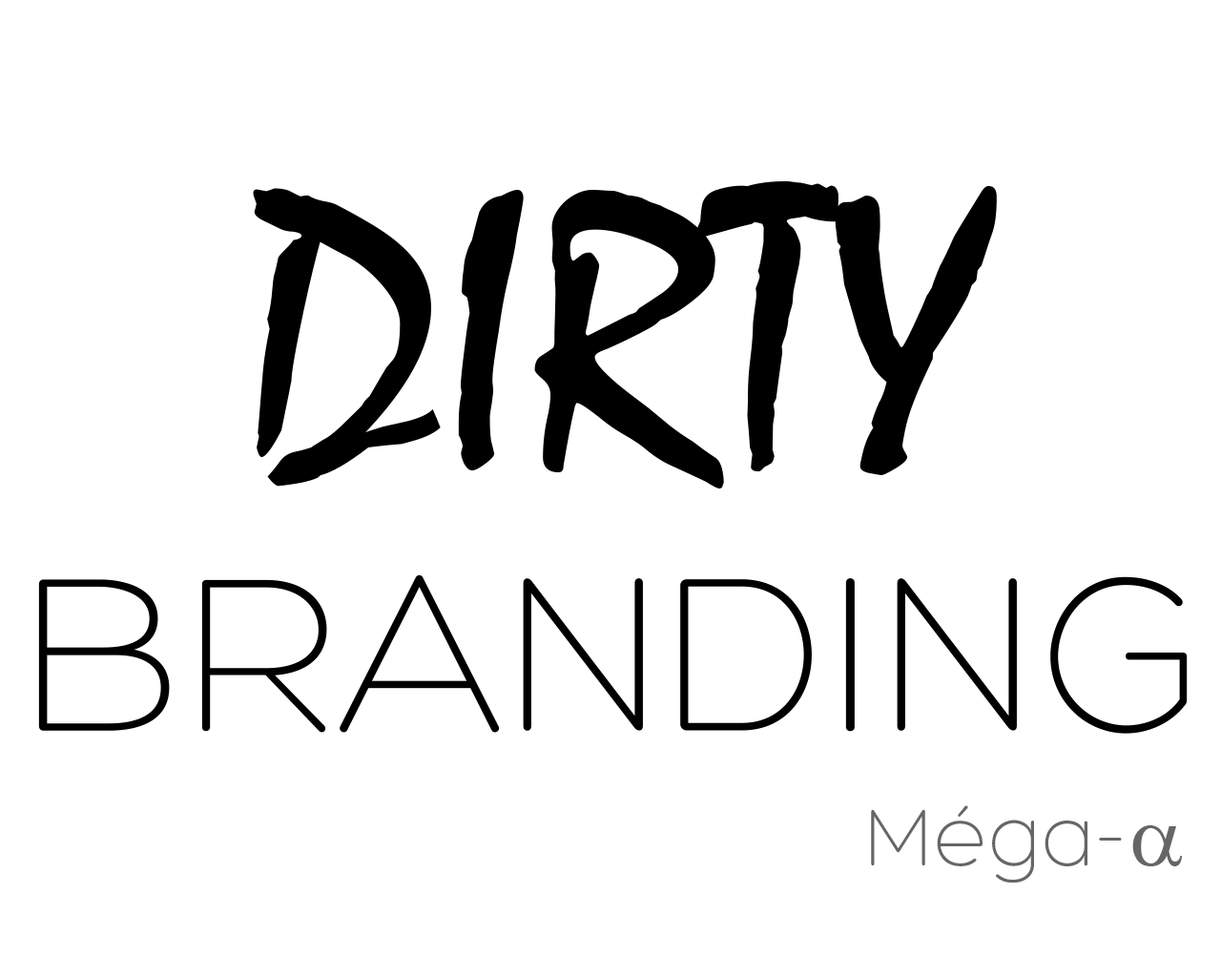
<style>
.page{position:relative;width:1221px;height:977px;background:#ffffff}
.page>*{position:absolute;margin:0}
.t1{font:408.2px "Mistral";color:#000000}
.t2{font:237.5px "Hero-Light";color:#000000}
.t3{font:86.8px "Hero-Light";color:#666666}
.t4{font:86.8px "SymbolMT";color:#666666}
</style>
<div class="page">
<p class="t1" style="left:253px;top:181px;width:744px;height:307px">DIRTY</p>
<p class="t2" style="left:38px;top:574px;width:1149px;height:159px">BRANDING</p>
<p class="t3" style="left:871px;top:805px;width:311px;height:78px">Méga-<span class="t4">α</span></p>
</div>
